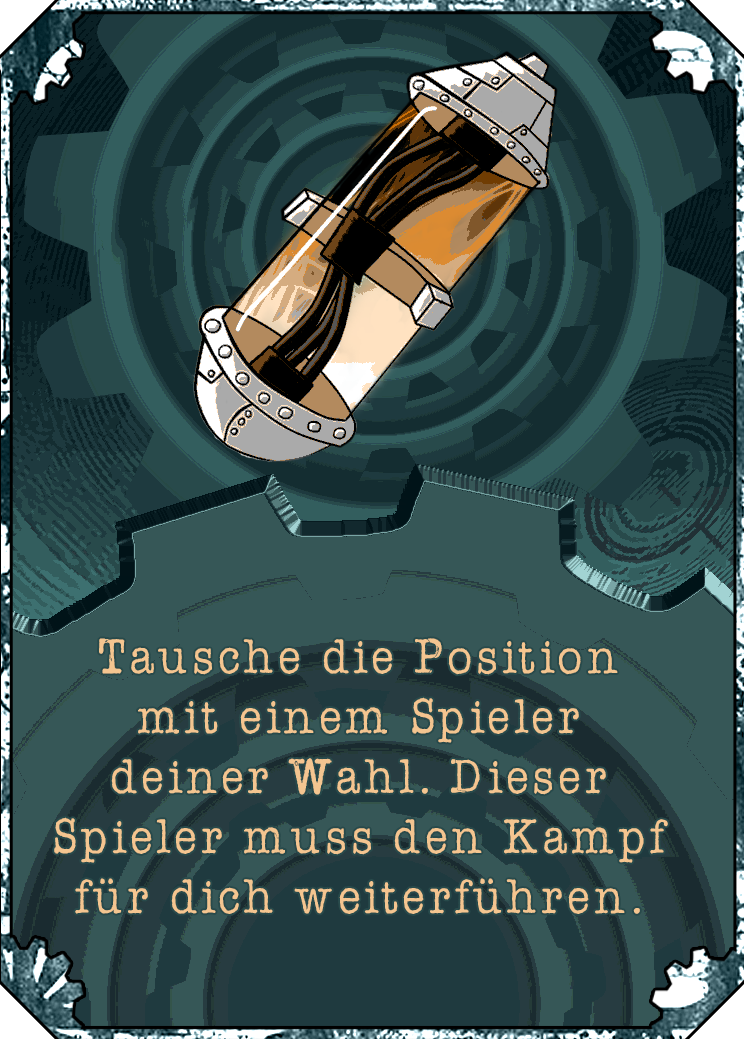
<style>
.page{position:relative;width:744px;height:1039px}
.page>*{position:absolute;margin:0}
.t1{font:50px "AmerTypewriterITCbyBT-Medium";letter-spacing:0.02em;color:#f4c590}
</style>
<div class="page">
<p class="t1" style="left:54px;top:638px;width:614px;height:276px;text-align:center">Tausche die Position mit einem Spieler deiner Wahl. Dieser Spieler muss den Kampf für dich weiterführen.</p>
</div>
